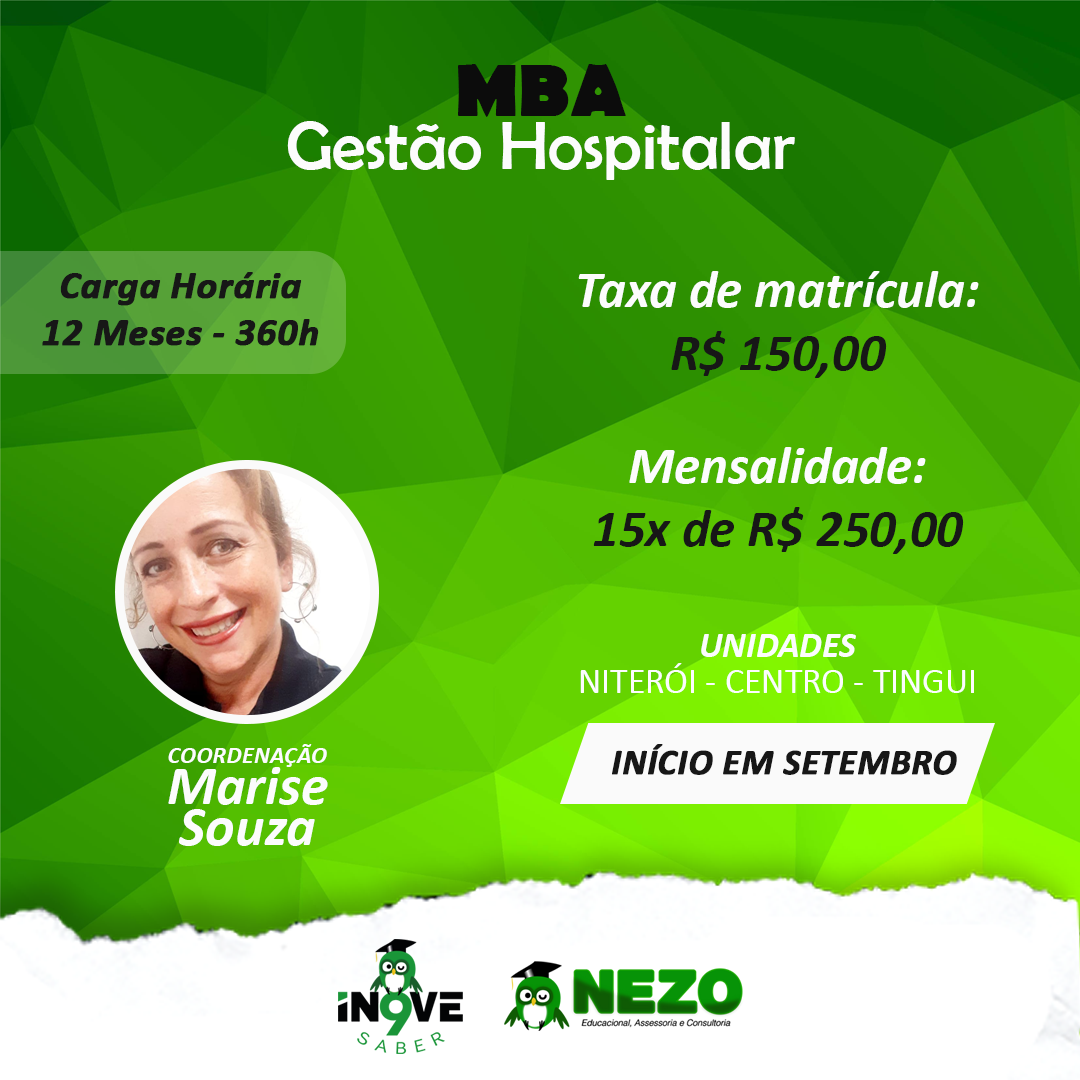
<style>
.page{position:relative;width:1080px;height:1080px}
.page>*{position:absolute;margin:0}
.t1{font:68.5px/53.7px "BerlinSansFB-Reg";color:#fcfcfc}
.t2{font:74.8px "BerlinSansFB-Bold";color:#0c0c0c}
.t3{font:39.2px "Calibri-BoldItalic";color:#171717;font-weight:bold}
.t4{font:52.8px "Calibri-BoldItalic";color:#fcfcfc}
.t5{font:52.8px "Calibri-BoldItalic";color:#171717}
.t6{font:52.8px/113px "Calibri-BoldItalic";color:#fcfcfc}
.t7{font:36px/36px "Calibri";color:#fcfcfc}
.t8{font:36px/56.9px "Calibri-BoldItalic";color:#fcfcfc}
.t9{font:56px/41.1px "Calibri-BoldItalic";color:#fcfcfc}
.t10{font:24.5px "Calibri-BoldItalic";color:#fcfcfc}
.t11{font:36.5px "Calibri-BoldItalic";color:#171717;font-weight:bold}
</style>
<div class="page">
<p class="t1" style="left:287px;top:64px;width:508px;height:116px;text-align:center"><span class="t2">MBA<br></span>Gestão Hospitalar</p>
<p class="t3" style="left:42px;top:272px;width:277px;height:74px;text-align:center">Carga Horária<br>12 Meses - 360h</p>
<p class="t4" style="left:578px;top:271px;width:401px;height:283px;text-align:center">Taxa de matrícula:<br><span class="t5">R$ 150,00<br></span><span class="t6">Mensalidade:<br></span><span class="t5">15x de R$ 250,00</span></p>
<p class="t7" style="left:580px;top:634px;width:394px;height:59px;text-align:center"><span class="t8">UNIDADES<br></span>NITERÓI - CENTRO - TINGUI</p>
<p class="t9" style="left:168px;top:744px;width:160px;height:102px;text-align:center"><span class="t10">COORDENAÇÃO<br></span>Marise<br>Souza</p>
<p class="t11" style="left:612px;top:744px;width:345px;height:31px">INÍCIO EM SETEMBRO</p>
</div>
